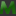
<style>
.page{position:relative;width:16px;height:16px;background:#333333}
.page>*{position:absolute;margin:0}
.t1{font:19.4px "TodaySHOP-Bold";color:#1e640f}
</style>
<div class="page">
<p class="t1" style="left:0px;top:1px;width:16px;height:13px">M</p>
</div>
